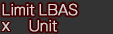
<style>
.page{position:relative;width:113px;height:34px;background:#333333}
.page>*{position:absolute;margin:0}
.t1{font:14px/16px "GothicMB101Pro-Light";letter-spacing:-0.04em;color:#ddd3d3;font-weight:bold}
</style>
<div class="page">
<p class="t1" style="left:2px;top:3px;width:76px;height:29px">Limit LBAS<br>      Unit</p>
</div>
